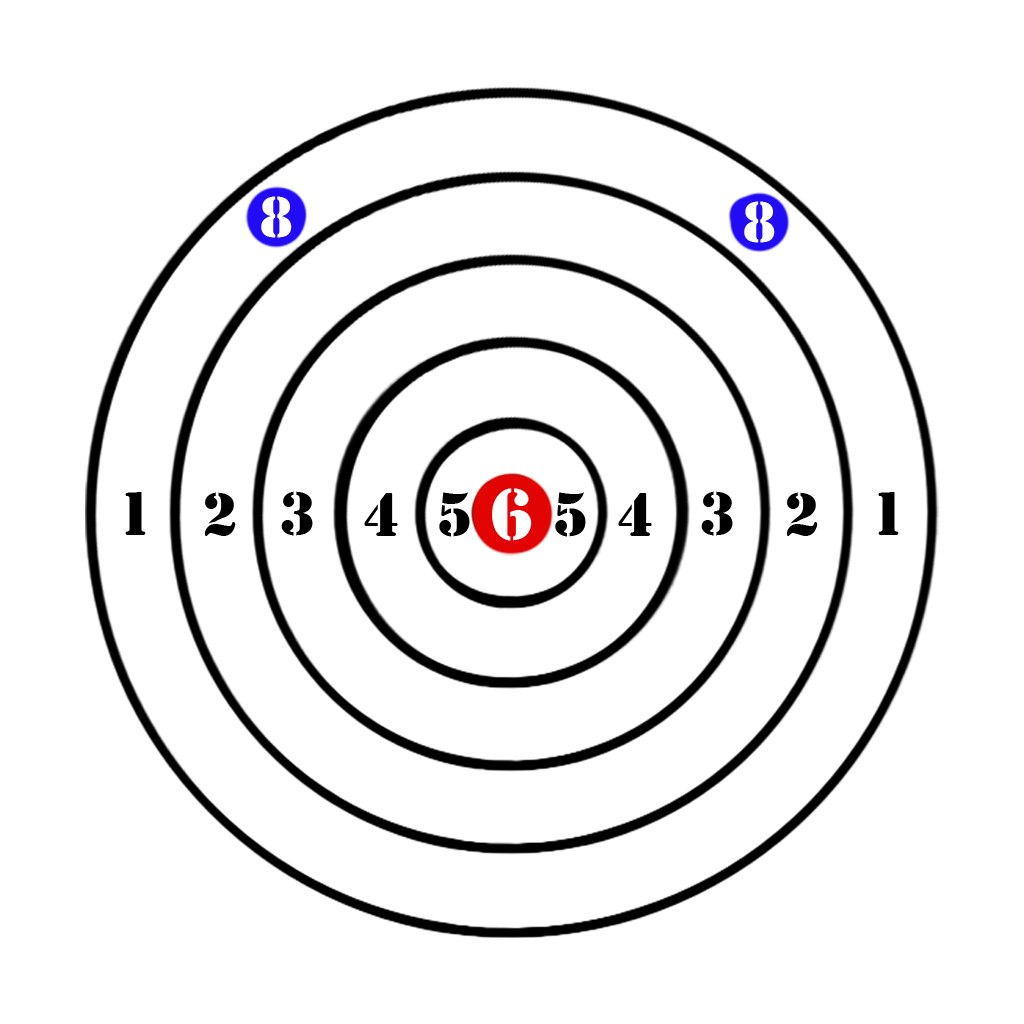
<style>
.page{position:relative;width:1024px;height:1024px;background:#ffffff}
.page>*{position:absolute;margin:0}
.t1{font:59.8px "Stencil";color:#ffffff}
.t2{font:63.8px "Stencil";color:#000000}
.t3{font:77.1px "Stencil";color:#ffffff}
</style>
<div class="page">
<p class="t1" style="left:261px;top:196px;width:31px;height:42px">8</p>
<p class="t1" style="left:744px;top:201px;width:31px;height:42px">8</p>
<p class="t2" style="left:125px;top:492px;width:21px;height:43px">1</p>
<p class="t2" style="left:204px;top:492px;width:32px;height:44px">2</p>
<p class="t2" style="left:281px;top:491px;width:32px;height:45px">3</p>
<p class="t2" style="left:364px;top:493px;width:34px;height:43px">4</p>
<p class="t2" style="left:439px;top:492px;width:31px;height:45px">5</p>
<p class="t3" style="left:492px;top:488px;width:40px;height:53px">6</p>
<p class="t2" style="left:555px;top:492px;width:31px;height:45px">5</p>
<p class="t2" style="left:618px;top:493px;width:34px;height:43px">4</p>
<p class="t2" style="left:701px;top:491px;width:32px;height:45px">3</p>
<p class="t2" style="left:786px;top:492px;width:32px;height:44px">2</p>
<p class="t2" style="left:878px;top:492px;width:21px;height:43px">1</p>
</div>
